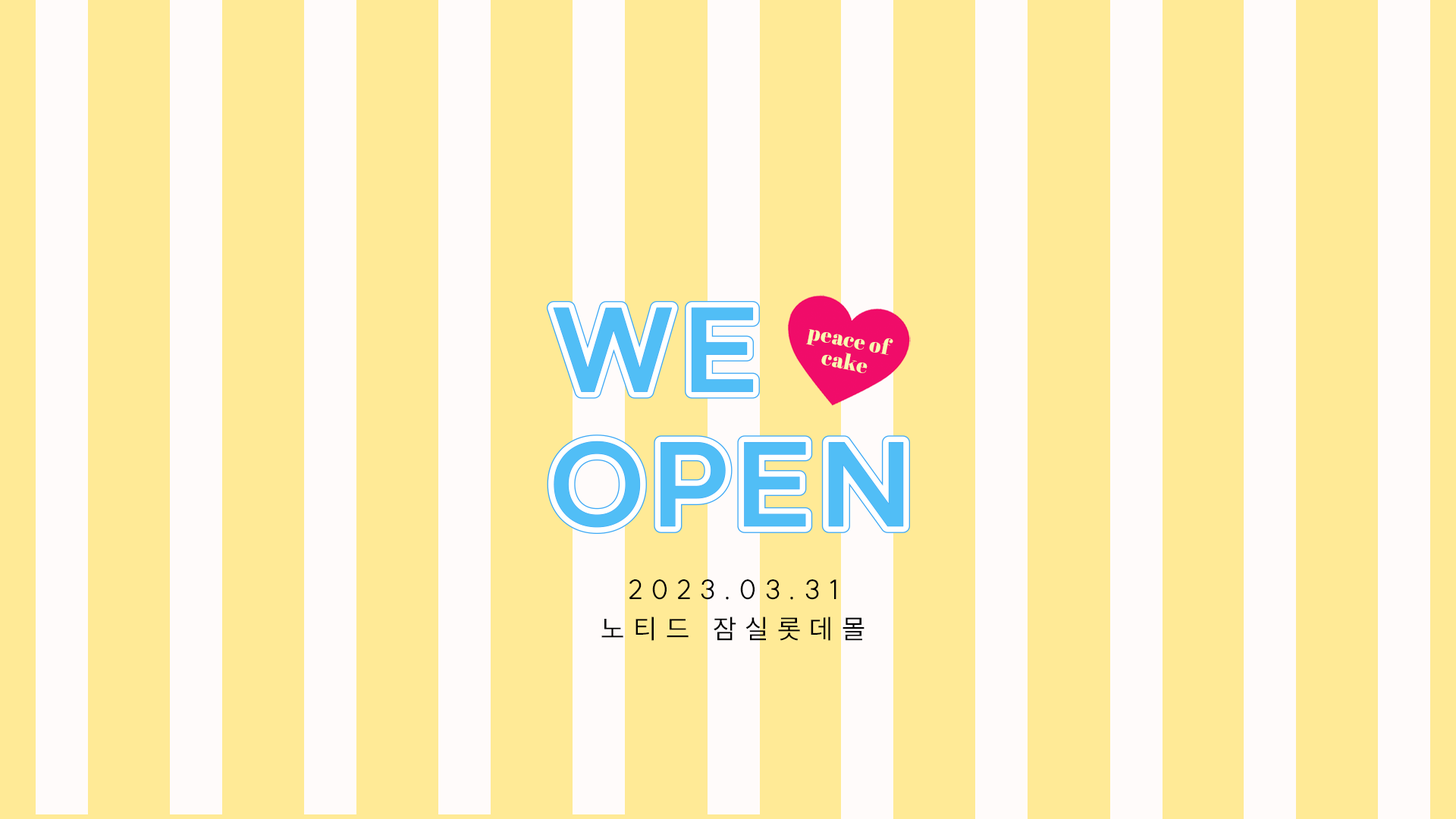
<style>
.page{position:relative;width:1456px;height:819px;background:#ffea96}
.page>*{position:absolute;margin:0}
.t1{font:21.2px/22.1px "AbrilFatface-Regular";letter-spacing:0.02em;color:#f8f9b2}
.t2{font:27px/39.3px "SUIT-Regular";letter-spacing:0.32em;color:#000000}
</style>
<div class="page">
<p class="t1" style="left:806px;top:329px;width:87px;height:44px;text-align:center;rotate:11deg">peace of<br>cake</p>
<p class="t2" style="left:601px;top:579px;width:263px;height:62px;text-align:center">2023.03.31<br>노티드 잠실롯데몰</p>
</div>
